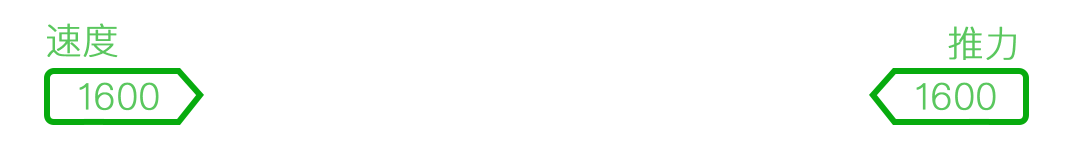
<style>
.page{position:relative;width:1080px;height:149px;background:#ffffff}
.page>*{position:absolute;margin:0}
.t1{font:36px "PingFangSC-Thin";color:#5ac75e;font-weight:bold}
</style>
<div class="page">
<p class="t1" style="left:47px;top:23px;width:71px;height:35px">速度</p>
<p class="t1" style="left:948px;top:26px;width:68px;height:34px">推力</p>
<p class="t1" style="left:79px;top:82px;width:80px;height:29px">1600</p>
<p class="t1" style="left:916px;top:82px;width:80px;height:29px">1600</p>
</div>
